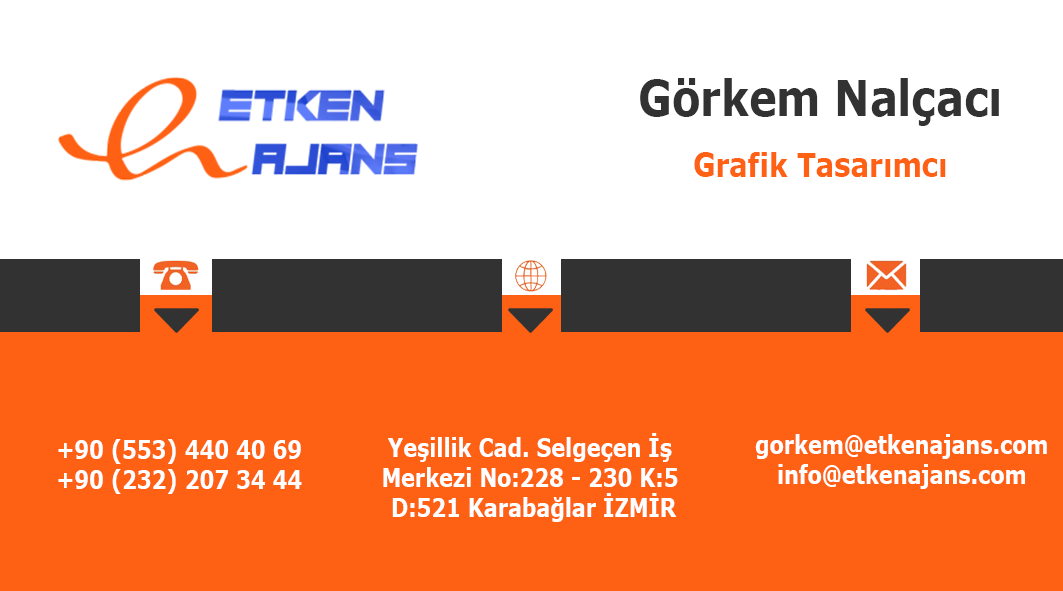
<style>
.page{position:relative;width:1063px;height:591px;background:#ffffff}
.page>*{position:absolute;margin:0}
.t1{font:50px "Verdana-Bold";color:#323232;scale:0.83 1}
.t2{font:33.3px "Verdana-Bold";color:#ff6114;scale:0.83 1}
.t3{font:25px "Verdana-Bold";color:#ffffff;scale:0.83 1}
</style>
<div class="page">
<p class="t1" style="left:640px;top:78px;width:359px;height:48px">Görkem Nalçacı</p>
<p class="t2" style="left:694px;top:152px;width:252px;height:25px">Grafik Tasarımcı</p>
<p class="t3" style="left:383px;top:433px;width:295px;height:89px;text-align:center">Yeşillik Cad. Selgeçen İş <br>Merkezi No:228 - 230 K:5 <br>D:521 Karabağlar İZMİR</p>
<p class="t3" style="left:755px;top:434px;width:292px;height:55px;text-align:center">gorkem@etkenajans.com<br>info@etkenajans.com</p>
<p class="t3" style="left:58px;top:439px;width:244px;height:55px;text-align:center">+90 (553) 440 40 69<br>+90 (232) 207 34 44</p>
</div>
